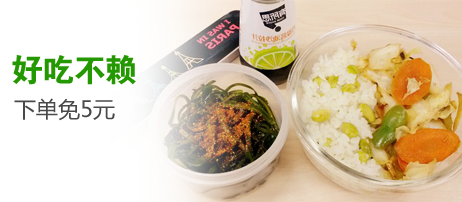
<style>
.page{position:relative;width:462px;height:202px;background:#ffffff}
.page>*{position:absolute;margin:0}
.t1{font:32px "FZDHTJW--GB1-0";color:#249800}
.t2{font:22px "MicrosoftYaHei";color:#494949}
</style>
<div class="page">
<p class="t1" style="left:12px;top:54px;width:124px;height:31px">好吃不赖</p>
<p class="t2" style="left:14px;top:98px;width:101px;height:23px">下单免5元</p>
</div>
